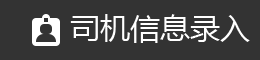
<style>
.page{position:relative;width:260px;height:60px;background:#333333}
.page>*{position:absolute;margin:0}
.t1{font:30px "MicrosoftYaHei";color:#ffffff}
</style>
<div class="page">
<p class="t1" style="left:70px;top:14px;width:180px;height:29px">司机信息录入</p>
</div>
